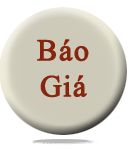
<style>
.page{position:relative;width:133px;height:150px;background:#ffffff}
.page>*{position:absolute;margin:0}
.t1{font:30px "TimesNewRomanPSMT";letter-spacing:0.03em;color:#88250e;font-weight:bold}
</style>
<div class="page">
<p class="t1" style="left:37px;top:39px;width:52px;height:59px;text-align:center">Báo<br>Giá</p>
</div>
